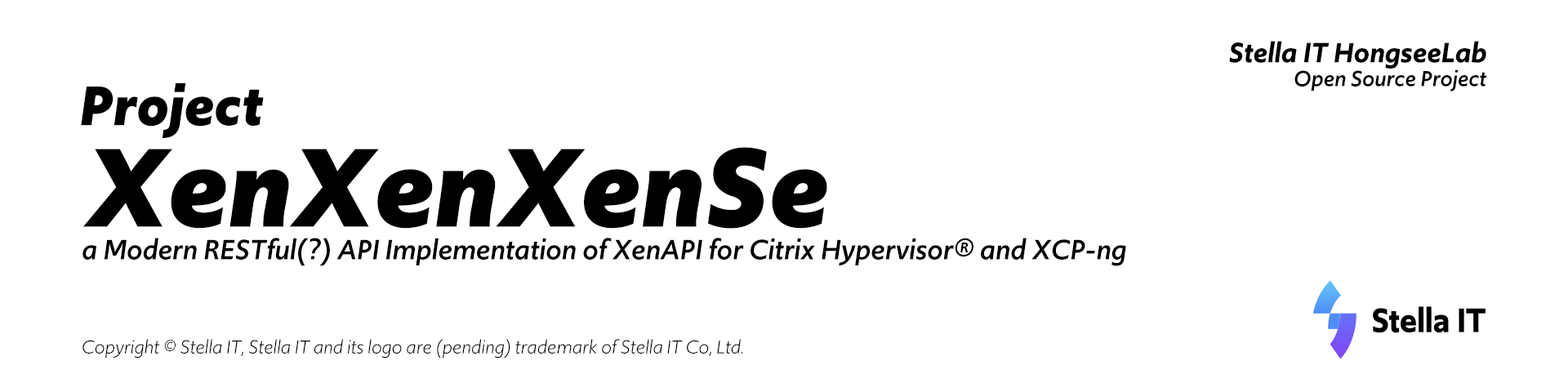
<style>
.page{position:relative;width:1568px;height:392px;background:#ffffff}
.page>*{position:absolute;margin:0}
.t1{font:29.4px/29.4px "Upgrade-SemiboldItalic";color:#000000}
.t2{font:22.9px/22.9px "Upgrade-MediumItalic";color:#000000}
.t3{font:58.8px "Upgrade-BoldItalic";color:#000000}
.t4{font:117.6px "Upgrade-BoldItalic";color:#000000}
.t5{font:29.4px "Upgrade-MediumItalic";color:#000000}
.t6{font:19.6px "Upgrade-BookItalic";color:#000000}
</style>
<div class="page">
<p class="t1" style="left:1229px;top:41px;width:258px;height:50px;text-align:right">Stella IT HongseeLab<br><span class="t2">Open Source Project</span></p>
<p class="t3" style="left:81px;top:82px;width:183px;height:56px">Project</p>
<p class="t4" style="left:83px;top:147px;width:744px;height:82px">XenXenXenSe</p>
<p class="t5" style="left:82px;top:238px;width:1044px;height:28px">a Modern RESTful(?) API Implementation of XenAPI for Citrix Hypervisor® and XCP-ng</p>
<p class="t6" style="left:82px;top:339px;width:661px;height:20px">Copyright © Stella IT, Stella IT and its logo are (pending) trademark of Stella IT Co, Ltd.</p>
</div>
